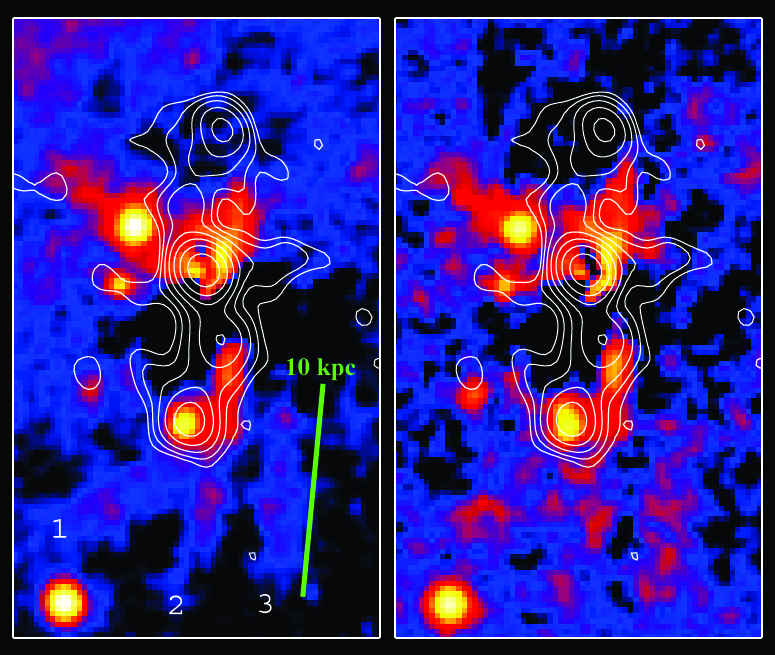
<style>
.page{position:relative;width:775px;height:655px}
.page>*{position:absolute;margin:0}
.t1{font:25px "TimesNewRomanPS-BoldMT";color:#58ff00}
</style>
<div class="page">
<p class="t1" style="left:286px;top:358px;width:70px;height:23px">10 kpc</p>
</div>
